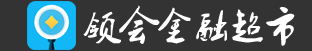
<style>
.page{position:relative;width:312px;height:51px;background:#333333}
.page>*{position:absolute;margin:0}
.t1{font:36px "2.0-";color:#ffffff}
</style>
<div class="page">
<p class="t1" style="left:83px;top:5px;width:212px;height:41px">领会金融超市</p>
</div>
